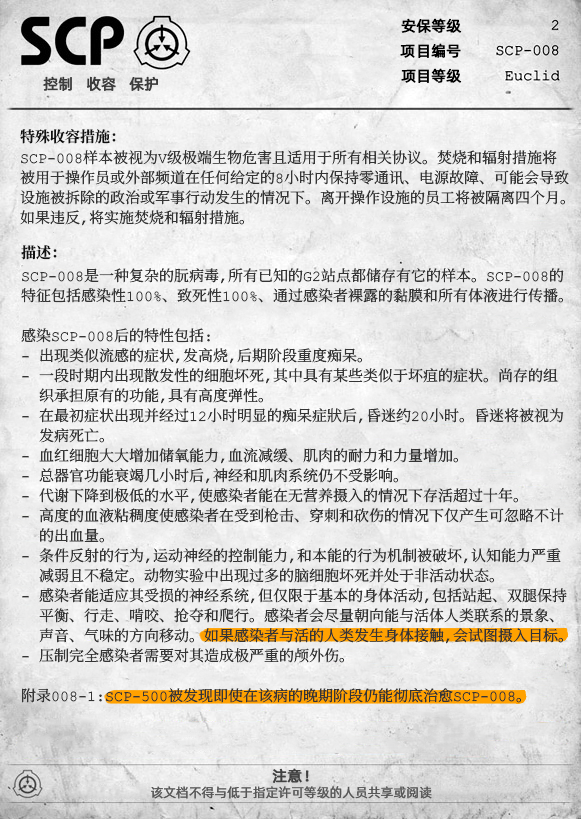
<style>
.page{position:relative;width:581px;height:819px}
.page>*{position:absolute;margin:0}
.t1{font:15px "AlibabaPuHuiTiR";color:#000000;font-weight:bold}
.t2{font:15px "AlibabaPuHuiTiR";color:#3d3d3d;font-weight:bold}
.t3{font:15px "ContainmentBreach-Bold";color:#121212}
.t4{font:15px/20px "ContainmentBreach-Regular";color:#353535}
.t5{font:15px "AlibabaPuHuiTiR";color:#414141;font-weight:bold}
.t6{font:13px "AlibabaPuHuiTiR";color:#575757}
</style>
<div class="page">
<p class="t1" style="left:401px;top:18px;width:61px;height:15px">安保等级</p>
<p class="t1" style="left:400px;top:43px;width:61px;height:15px">项目编号</p>
<p class="t2" style="left:43px;top:76px;width:115px;height:15px">控制   收容   保护</p>
<p class="t1" style="left:401px;top:68px;width:61px;height:15px">项目等级</p>
<p class="t3" style="left:20px;top:129px;width:96px;height:15px">特殊收容措施：</p>
<p class="t4" style="left:20px;top:150px;width:549px;height:76px">SCP-008样本被视为V级极端生物危害且适用于所有相关协议。焚烧和辐射措施将<br>被用于操作员或外部频道在任何给定的8小时内保持零通讯、电源故障、可能会导致<br>设施被拆除的政治或军事行动发生的情况下。离开操作设施的员工将被隔离四个月。<br>如果违反，将实施焚烧和辐射措施。</p>
<p class="t3" style="left:21px;top:245px;width:36px;height:15px">描述：</p>
<p class="t4" style="left:21px;top:268px;width:546px;height:435px">SCP-008是一种复杂的朊病毒，所有已知的G2站点都储存有它的样本。SCP-008的<br>特征包括感染性100%、致死性100%、通过感染者裸露的黏膜和所有体液进行传播。<br><br>感染SCP-008后的特性包括：<br>- 出现类似流感的症状，发高烧，后期阶段重度痴呆。<br>- 一段时期内出现散发性的细胞坏死，其中具有某些类似于坏疽的症状。尚存的组<br>  织承担原有的功能，具有高度弹性。<br>- 在最初症状出现并经过12小时明显的痴呆症狀后，昏迷约20小时。昏迷将被视为<br>  发病死亡。<br>- 血红细胞大大增加储氧能力，血流减缓、肌肉的耐力和力量增加。<br>- 总器官功能衰竭几小时后，神经和肌肉系统仍不受影响。<br>- 代谢下降到极低的水平，使感染者能在无营养摄入的情况下存活超过十年。<br>- 高度的血液粘稠度使感染者在受到枪击、穿刺和砍伤的情况下仅产生可忽略不计<br>  的出血量。<br>- 条件反射的行为，运动神经的控制能力，和本能的行为机制被破坏，认知能力严重<br>  减弱且不稳定。动物实验中出现过多的脑细胞坏死并处于非活动状态。<br>- 感染者能适应其受损的神经系统，但仅限于基本的身体活动，包括站起、双腿保持<br>  平衡、行走、啃咬、抢夺和爬行。感染者会尽量朝向能与活体人类联系的景象、<br>  声音、气味的方向移动。如果感染者与活的人类发生身体接触，会试图摄入目标。<br>- 压制完全感染者需要对其造成极严重的颅外伤。<br><br>附录008-1：SCP-500被发现即使在该病的晚期阶段仍能彻底治愈SCP-008。</p>
<p class="t5" style="left:272px;top:768px;width:37px;height:15px">注意！</p>
<p class="t6" style="left:151px;top:786px;width:281px;height:13px">该文档不得与低于指定许可等级的人员共享或阅读</p>
</div>
